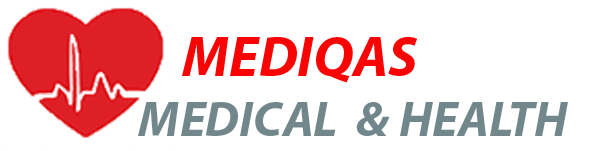
<style>
.page{position:relative;width:600px;height:151px;background:#ffffff}
.page>*{position:absolute;margin:0}
.t1{font:50px "MyriadPro-BoldIt";color:#72878c}
.t2{font:42.9px "MyriadPro-BoldIt";color:#f80404}
.t3{font:57.2px "MyriadPro-BoldIt";color:#f80404}
</style>
<div class="page">
<p class="t1" style="left:138px;top:37px;width:430px;height:99px"><span class="t2">        </span><span class="t3">MEDIQAS<br>   </span>MEDICAL  &amp; HEALTH</p>
</div>
